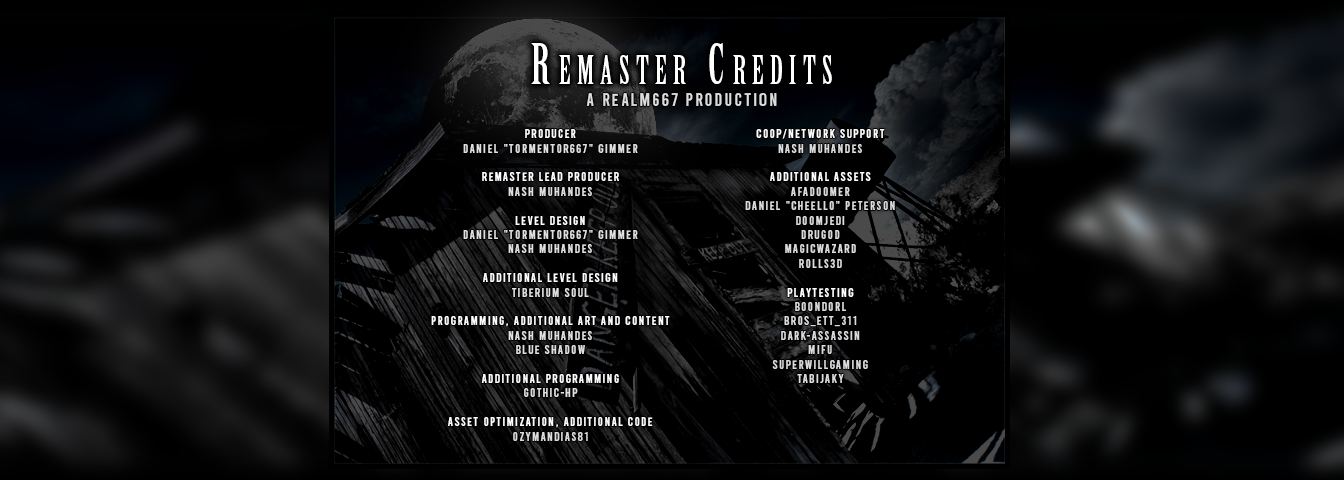
<style>
.page{position:relative;width:1344px;height:480px;background:#000000}
.page>*{position:absolute;margin:0}
.t1{font:55.2px "BirchStd";letter-spacing:0.16em;color:#ffffff;font-variant:small-caps}
.t2{font:17.7px "Bebas-Regular";letter-spacing:0.12em;color:#dcdcdc}
.t3{font:12px "Bebas-Regular";letter-spacing:0.12em;color:#e0e0e0}
.t4{font:12px "Bebas-Regular";letter-spacing:0.12em;color:#ffffff}
.t5{font:12px "Bebas-Regular";letter-spacing:0.12em;color:#dcdcdc}
</style>
<div class="page">
<p class="t1" style="left:531px;top:43px;width:301px;height:41px">Remaster Credits</p>
<p class="t2" style="left:586px;top:93px;width:191px;height:13px">A Realm667 Production</p>
<p class="t3" style="left:431px;top:129px;width:239px;height:312px;text-align:center"><span class="t4">PRODUCER<br></span>Daniel "Tormentor667" Gimmer<br><br><span class="t4">REMASTER LEAD PRODUCER<br></span>Nash Muhandes<br><br><span class="t4">LEVEL DESIGN<br></span>Daniel "Tormentor667" Gimmer<br>Nash Muhandes<br><br><span class="t4">ADDITIONAL LEVEL DESIGN<br></span>Tiberium Soul<br><br><span class="t4">PROGRAMMING, ADDITIONAL ART AND CONTENT<br></span>Nash Muhandes<br>Blue Shadow<br><br><span class="t4">ADDITIONAL PROGRAMMING<br></span>Gothic-HP<br><br><span class="t4">ASSET OPTIMIZATION, ADDITIONAL CODE<br></span><span class="t5">Ozymandias81</span></p>
<p class="t5" style="left:745px;top:129px;width:150px;height:254px;text-align:center"><span class="t4">COOP/NETWORK SUPPORT<br></span>Nash Muhandes<br><br><span class="t4">ADDITIONAL ASSETS<br></span>AFADoomer<br>Daniel "Cheello" Peterson<br>DoomJedi<br>Drugod<br>MagicWazard<br>Rolls3D<br><br><span class="t4">PLAYTESTING<br></span>Boondorl<br>bros_ett_311<br>Dark-Assassin<br>Mifu<br>SuperWillGaming<br>Tabijaky</p>
</div>
